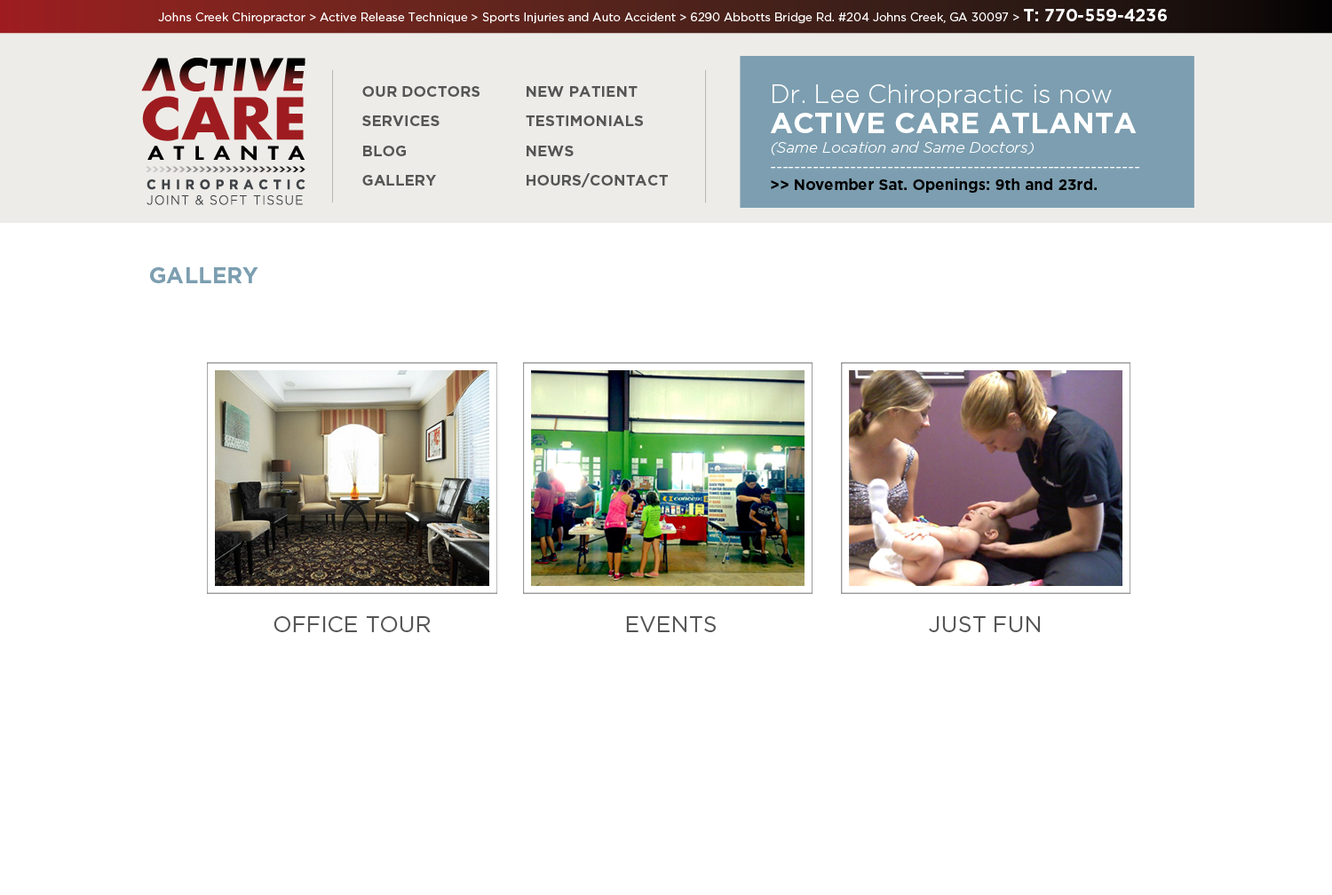
<style>
.page{position:relative;width:1332px;height:895px;background:#ffffff}
.page>*{position:absolute;margin:0}
.t1{font:11.5px "GothamHTF-Book";color:#ffffff}
.t2{font:16.9px "GothamHTF-Bold";color:#ffffff}
.t3{font:15.1px "GothamHTF-Bold";color:#555555}
.t4{font:15.1px/19.5px "GothamHTF-LightItalic";color:#ffffff}
.t5{font:25.8px/26.5px "GothamHTF-Light";color:#ffffff}
.t6{font:29.3px/30.2px "GothamHTF-Bold";color:#ffffff}
.t7{font:15.1px/17.8px "GothamHTF-Bold";color:#000000}
.t8{font:22.2px "GothamHTF-Bold";color:#7c9eb0}
.t9{font:22.2px "GothamHTF-Book";color:#555555}
</style>
<div class="page">
<p class="t1" style="left:158px;top:9px;width:1009px;height:15px">Johns Creek Chiropractor &gt; Active Release Technique &gt; Sports Injuries and Auto Accident &gt; 6290 Abbotts Bridge Rd. #204 Johns Creek, GA 30097 &gt; <span class="t2">T: 770-559-4236</span></p>
<p class="t3" style="left:362px;top:86px;width:118px;height:11px">OUR DOCTORS</p>
<p class="t3" style="left:527px;top:86px;width:111px;height:11px">NEW PATIENT</p>
<p class="t4" style="left:770px;top:84px;width:370px;height:109px"><span class="t5">Dr. Lee Chiropractic is now <br></span><span class="t6">ACTIVE CARE ATLANTA<br></span>(Same Location and Same Doctors)<br>------------------------------------------------------------<br><span class="t7">&gt;&gt; November Sat. Openings: 9th and 23rd.</span></p>
<p class="t3" style="left:362px;top:115px;width:78px;height:11px">SERVICES</p>
<p class="t3" style="left:526px;top:115px;width:117px;height:11px">TESTIMONIALS</p>
<p class="t3" style="left:363px;top:146px;width:43px;height:10px">BLOG</p>
<p class="t3" style="left:527px;top:146px;width:47px;height:10px">NEWS</p>
<p class="t3" style="left:527px;top:173px;width:141px;height:14px">HOURS/CONTACT</p>
<p class="t3" style="left:362px;top:175px;width:74px;height:11px">GALLERY</p>
<p class="t8" style="left:150px;top:267px;width:108px;height:16px">GALLERY</p>
<p class="t9" style="left:274px;top:616px;width:157px;height:16px">OFFICE TOUR</p>
<p class="t9" style="left:626px;top:616px;width:90px;height:16px">EVENTS</p>
<p class="t9" style="left:929px;top:616px;width:111px;height:16px">JUST FUN</p>
</div>
